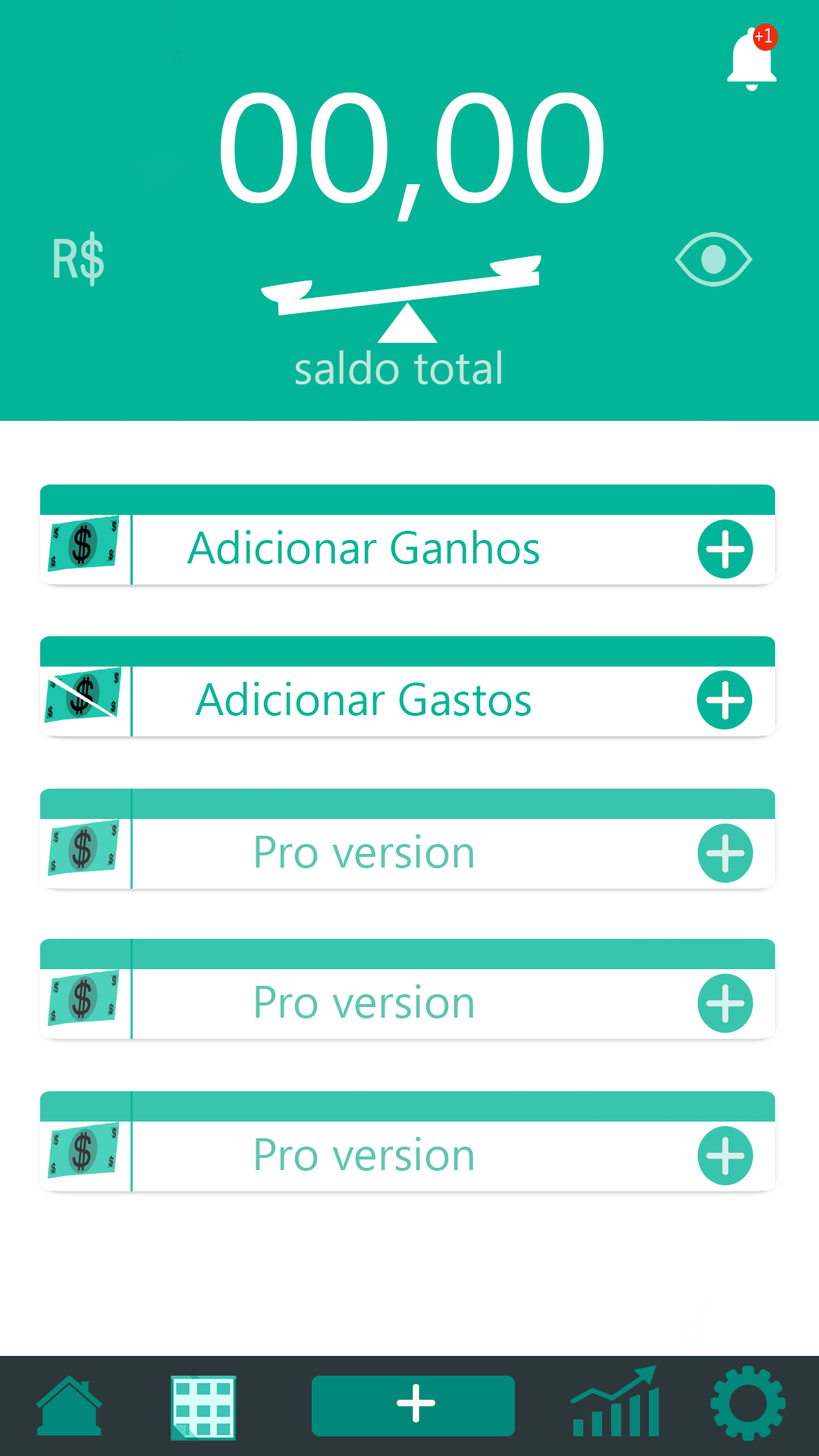
<style>
.page{position:relative;width:819px;height:1456px;background:#ffffff}
.page>*{position:absolute;margin:0}
.t1{font:154.3px "MicrosoftTaiLe";color:#ffffff;scale:1.08 1}
.t2{font:45.5px "MicrosoftTaiLe";color:#c0e6dd}
.t3{font:45.5px "MicrosoftTaiLe";color:#03b598}
.t4{font:45.5px "MicrosoftTaiLe";color:#5dc6b1}
</style>
<div class="page">
<p class="t1" style="left:221px;top:92px;width:383px;height:129px">00,00</p>
<p class="t2" style="left:296px;top:350px;width:205px;height:34px">saldo total</p>
<p class="t3" style="left:187px;top:530px;width:352px;height:34px">Adicionar Ganhos</p>
<p class="t3" style="left:195px;top:682px;width:336px;height:34px">Adicionar Gastos</p>
<p class="t4" style="left:256px;top:834px;width:217px;height:34px">Pro version</p>
<p class="t4" style="left:256px;top:984px;width:217px;height:34px">Pro version</p>
<p class="t4" style="left:256px;top:1137px;width:217px;height:34px">Pro version</p>
</div>
